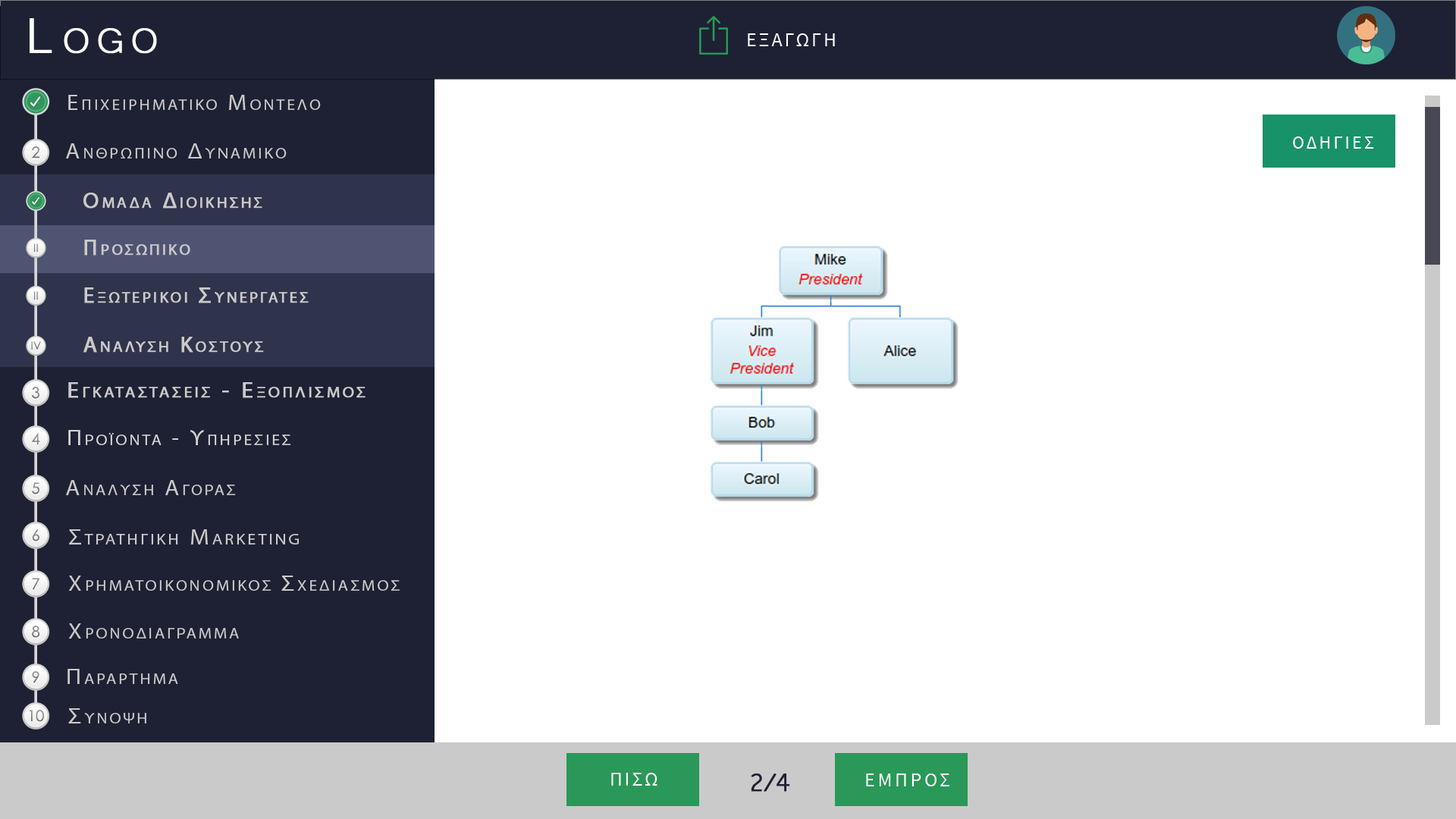
<style>
.page{position:relative;width:1456px;height:819px;background:#ffffff}
.page>*{position:absolute;margin:0}
.t1{font:63.7px "Microsoft-Yi-Baiti";letter-spacing:0.13em;color:#ffffff;font-variant:small-caps;font-weight:bold}
.t2{font:20px "SourceSansPro-Regular";letter-spacing:0.1em;color:#fefefe;text-transform:uppercase}
.t3{font:21.7px "MyriadPro-Regular";letter-spacing:0.13em;color:#cbcaca;font-variant:small-caps;scale:1.09 1}
.t4{font:23.4px "Microsoft-Yi-Baiti";letter-spacing:0.13em;color:#cbcaca;font-variant:small-caps;font-weight:bold}
.t5{font:18.2px "SourceSansPro-Regular";letter-spacing:0.13em;color:#ffffff;text-transform:uppercase}
.t6{font:15.3px "CenturyGothic";color:#7d7d7d}
.t7{font:22.3px "MyriadPro-Regular";letter-spacing:0.13em;color:#cbcaca;font-variant:small-caps;font-weight:bold}
.t8{font:11.2px "CenturyGothic";color:#828282}
.t9{font:11.2px "CenturyGothic";color:#818181}
.t10{font:15.3px "CenturyGothic";color:#8b8b8b}
.t11{font:21.7px/91px "MyriadPro-Regular";letter-spacing:0.13em;color:#cbcaca;font-variant:small-caps;font-weight:bold;scale:1.09 1}
.t12{font:23.4px/91px "Microsoft-Yi-Baiti";letter-spacing:0.13em;color:#cbcaca;font-variant:small-caps;font-weight:bold}
.t13{font:15.3px "CenturyGothic";color:#878787}
.t14{font:21.7px "MyriadPro-Regular";letter-spacing:0.13em;color:#d6d6d6;font-variant:small-caps;scale:1.09 1}
.t15{font:23.4px "Microsoft-Yi-Baiti";letter-spacing:0.13em;color:#d6d6d6;font-variant:small-caps;font-weight:bold}
.t16{font:15.3px "CenturyGothic";color:#898989}
.t17{font:15.3px "CenturyGothic";color:#838383}
.t18{font:22.2px "MyriadPro-Regular";letter-spacing:0.13em;color:#cbcaca;font-variant:small-caps;scale:1.09 1}
.t19{font:25.5px "Microsoft-Yi-Baiti";letter-spacing:0.13em;color:#cbcaca;font-variant:small-caps;font-weight:bold}
.t20{font:15.3px "CenturyGothic";color:#888888}
.t21{font:23.7px "Microsoft-Yi-Baiti";letter-spacing:0.13em;color:#cbcaca;font-variant:small-caps;scale:1.09 1}
.t22{font:32.8px "Microsoft-Yi-Baiti";letter-spacing:-0.1em;color:#1e2133;font-weight:bold}
.t23{font:20px "SourceSansPro-Regular";letter-spacing:0.13em;color:#fefefe;text-transform:uppercase}
</style>
<div class="page">
<p class="t1" style="left:30px;top:18px;width:127px;height:36px">Logo</p>
<p class="t2" style="left:748px;top:33px;width:87px;height:13px">εξαγωγη</p>
<p class="t3" style="left:68px;top:95px;width:253px;height:15px"><span class="t4">   </span>Επιχειρηματικο Μοντελο</p>
<p class="t5" style="left:1293px;top:136px;width:81px;height:13px">Οδηγιεσ</p>
<p class="t6" style="left:32px;top:146px;width:7px;height:12px">2</p>
<p class="t3" style="left:66px;top:143px;width:221px;height:15px"><span class="t4">   </span>Ανθρωπινο Δυναμικο</p>
<p class="t7" style="left:83px;top:193px;width:179px;height:16px">Ομαδα Διοικησησ</p>
<p class="t8" style="left:34px;top:243px;width:4px;height:10px">II</p>
<p class="t7" style="left:84px;top:240px;width:106px;height:16px">Προσωπικο</p>
<p class="t8" style="left:34px;top:291px;width:4px;height:9px">II</p>
<p class="t7" style="left:84px;top:287px;width:225px;height:16px">Εξωτερικοι Συνεργατεσ</p>
<p class="t9" style="left:31px;top:341px;width:10px;height:9px">IV</p>
<p class="t7" style="left:83px;top:337px;width:181px;height:16px">Αναλυση Κοστουσ</p>
<p class="t10" style="left:32px;top:387px;width:7px;height:12px">3</p>
<p class="t11" style="left:68px;top:382px;width:298px;height:16px"><span class="t12">   </span>Εγκαταστασεισ - Εξοπλισμοσ<br><br><span class="t12">Equipment</span></p>
<p class="t13" style="left:32px;top:433px;width:8px;height:12px">4</p>
<p class="t14" style="left:68px;top:430px;width:223px;height:15px"><span class="t15">   </span>Προϊοντα - Υπηρεσιεσ</p>
<p class="t16" style="left:32px;top:482px;width:7px;height:12px">5</p>
<p class="t3" style="left:66px;top:480px;width:170px;height:15px"><span class="t4">   </span>Αναλυση Αγορασ</p>
<p class="t17" style="left:32px;top:529px;width:7px;height:12px">6</p>
<p class="t18" style="left:69px;top:529px;width:230px;height:15px"><span class="t19">   </span>Στρατηγικη Marketing</p>
<p class="t20" style="left:32px;top:578px;width:8px;height:12px">7</p>
<p class="t3" style="left:68px;top:576px;width:332px;height:15px"><span class="t19">   </span>Χρηματοικονομικοσ Σχεδιασμοσ</p>
<p class="t10" style="left:32px;top:626px;width:8px;height:12px">8</p>
<p class="t3" style="left:68px;top:623px;width:171px;height:16px"><span class="t19">   </span>Χρονοδιαγραμμα</p>
<p class="t17" style="left:32px;top:671px;width:7px;height:12px">9</p>
<p class="t3" style="left:67px;top:669px;width:111px;height:15px"><span class="t21">   </span>Παραρτημα</p>
<p class="t13" style="left:29px;top:710px;width:15px;height:12px">10</p>
<p class="t3" style="left:68px;top:708px;width:78px;height:15px"><span class="t21">   </span>Συνοψη</p>
<p class="t2" style="left:611px;top:773px;width:46px;height:13px">Πισω</p>
<p class="t22" style="left:751px;top:773px;width:39px;height:19px">2/4</p>
<p class="t23" style="left:866px;top:773px;width:83px;height:13px">εμπροσ</p>
</div>
